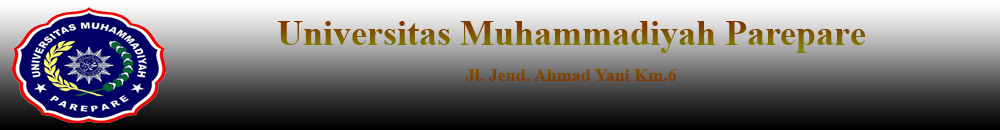
<style>
.page{position:relative;width:1000px;height:130px}
.page>*{position:absolute;margin:0}
.t1{font:36px "TimesNewRomanPS-BoldMT"}
.t2{font:18px "TimesNewRomanPS-BoldMT"}
</style>
<div class="page">
<p class="t1" style="left:277px;top:21px;width:589px;height:60px;text-align:center">Universitas Muhammadiyah Parepare<br><br><span class="t2">Jl. Jend. Ahmad Yani Km.6</span></p>
</div>
